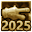
<style>
.page{position:relative;width:32px;height:32px}
.page>*{position:absolute;margin:0}
.t1{font:12px "MicrosoftYaHeiUI-Bold"}
</style>
<div class="page">
<p class="t1" style="left:1px;top:20px;width:30px;height:11px">2025</p>
</div>
